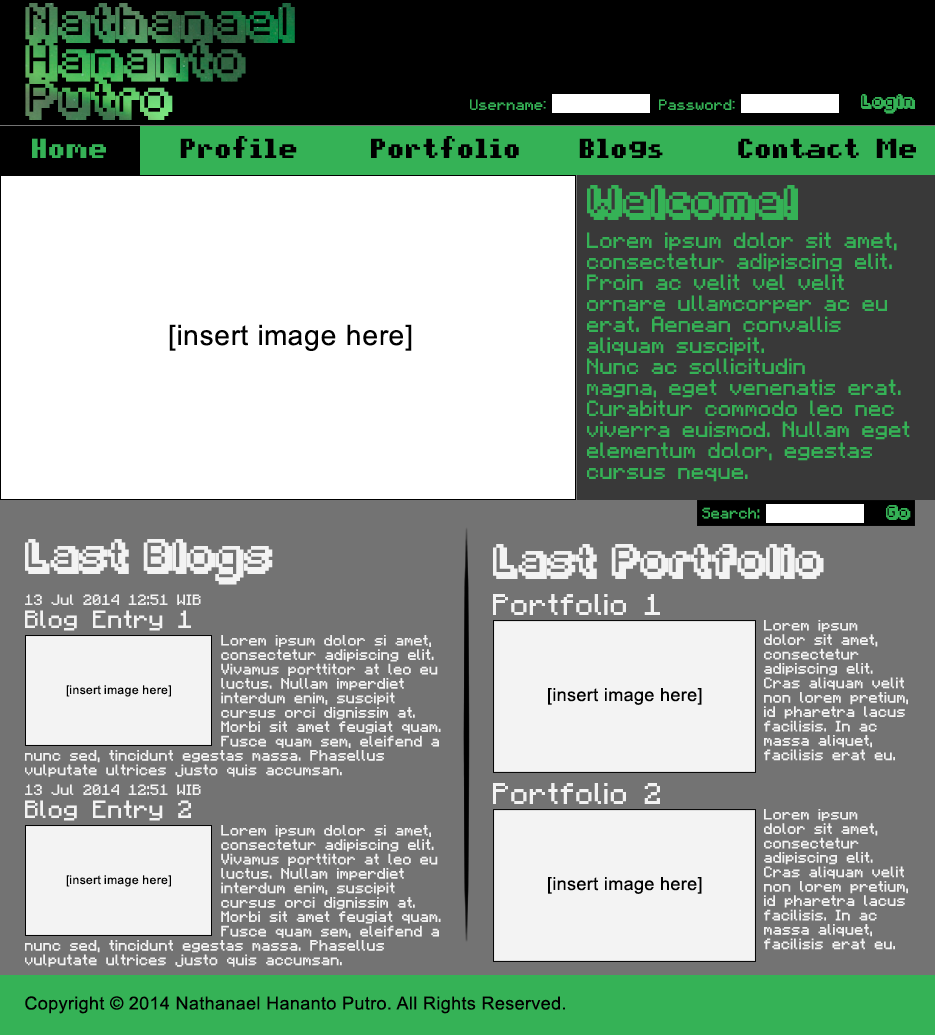
<style>
.page{position:relative;width:935px;height:1035px;background:#737373}
.page>*{position:absolute;margin:0}
.t1{font:32px "Fipps-Regular";letter-spacing:0.02em}
.t2{font:12px "pixelmix";letter-spacing:0.02em;color:#35b256}
.t3{font:12px "Fipps-Regular";letter-spacing:0.02em;color:#35b256}
.t4{font:22px "pixelmix-bold";letter-spacing:0.02em;color:#000000}
.t5{font:22px "pixelmix-bold";letter-spacing:0.02em;color:#35b256}
.t6{font:28px "Fipps-Regular";letter-spacing:0.02em;color:#35b256}
.t7{font:17.5px "Minecraftia";letter-spacing:0.02em;color:#35b256}
.t8{font:28px "ArialMT";letter-spacing:0.02em;color:#000000}
.t9{font:12px "Minecraftia";letter-spacing:0.02em;color:#35b256}
.t10{font:28px "Fipps-Regular";letter-spacing:0.02em;color:#f3f3f3}
.t11{font:12px "Minecraftia";letter-spacing:0.02em;color:#f3f3f3}
.t12{font:24px "Minecraftia";letter-spacing:0.02em;color:#f3f3f3}
.t13{font:20px "Minecraftia";letter-spacing:0.02em;color:#f3f3f3}
.t14{font:12px "ArialMT";letter-spacing:0.02em;color:#000000}
.t15{font:18px "ArialMT";letter-spacing:0.02em;color:#000000}
</style>
<div class="page">
<p class="t1" style="left:25px;top:3px;width:270px;height:117px">Nathanael<br>Hananto<br>Putro</p>
<p class="t2" style="left:470px;top:99px;width:76px;height:11px">Username:</p>
<p class="t2" style="left:659px;top:99px;width:76px;height:11px">Password:</p>
<p class="t3" style="left:861px;top:94px;width:54px;height:20px">Login</p>
<p class="t4" style="left:32px;top:136px;width:884px;height:22px"><span class="t5">Home</span>     Profile     Portfolio    Blogs     Contact Me</p>
<p class="t6" style="left:587px;top:185px;width:211px;height:35px">Welcome!</p>
<p class="t7" style="left:587px;top:232px;width:323px;height:250px">Lorem ipsum dolor sit amet,<br>consectetur adipiscing elit.<br>Proin ac velit vel velit<br>ornare ullamcorper ac eu<br>erat. Aenean convallis<br>aliquam suscipit.<br>Nunc ac sollicitudin<br>magna, eget venenatis erat.<br>Curabitur commodo leo nec<br>viverra euismod. Nullam eget<br>elementum dolor, egestas<br>cursus neque.</p>
<p class="t8" style="left:169px;top:324px;width:243px;height:27px">[insert image here]</p>
<p class="t9" style="left:702px;top:507px;width:58px;height:12px">Search:</p>
<p class="t3" style="left:886px;top:505px;width:25px;height:15px">Go</p>
<p class="t10" style="left:25px;top:539px;width:248px;height:46px">Last Blogs</p>
<p class="t10" style="left:493px;top:544px;width:331px;height:35px">Last Portfolio</p>
<p class="t11" style="left:25px;top:594px;width:176px;height:11px">13 Jul 2014 12:51 WIB</p>
<p class="t12" style="left:493px;top:594px;width:167px;height:21px">Portfolio 1</p>
<p class="t13" style="left:25px;top:610px;width:166px;height:21px">Blog Entry 1</p>
<p class="t11" style="left:764px;top:620px;width:144px;height:141px">Lorem ipsum<br> dolor sit amet,<br> consectetur<br> adipiscing elit.<br> Cras aliquam velit<br> non lorem pretium,<br> id pharetra lacus<br> facilisis. In ac<br> massa aliquet,<br> facilisis erat eu.</p>
<p class="t14" style="left:66px;top:685px;width:105px;height:12px">[insert image here]</p>
<p class="t15" style="left:548px;top:688px;width:154px;height:17px">[insert image here]</p>
<p class="t11" style="left:25px;top:784px;width:176px;height:11px">13 Jul 2014 12:51 WIB</p>
<p class="t12" style="left:493px;top:783px;width:167px;height:21px">Portfolio 2</p>
<p class="t13" style="left:25px;top:800px;width:166px;height:21px">Blog Entry 2</p>
<p class="t11" style="left:764px;top:809px;width:144px;height:141px">Lorem ipsum<br> dolor sit amet,<br> consectetur<br> adipiscing elit.<br> Cras aliquam velit<br> non lorem pretium,<br> id pharetra lacus<br> facilisis. In ac<br> massa aliquet,<br> facilisis erat eu.</p>
<p class="t14" style="left:66px;top:875px;width:105px;height:12px">[insert image here]</p>
<p class="t15" style="left:548px;top:877px;width:154px;height:17px">[insert image here]</p>
<p class="t15" style="left:25px;top:996px;width:540px;height:18px">Copyright © 2014 Nathanael Hananto Putro. All Rights Reserved.</p>
</div>
